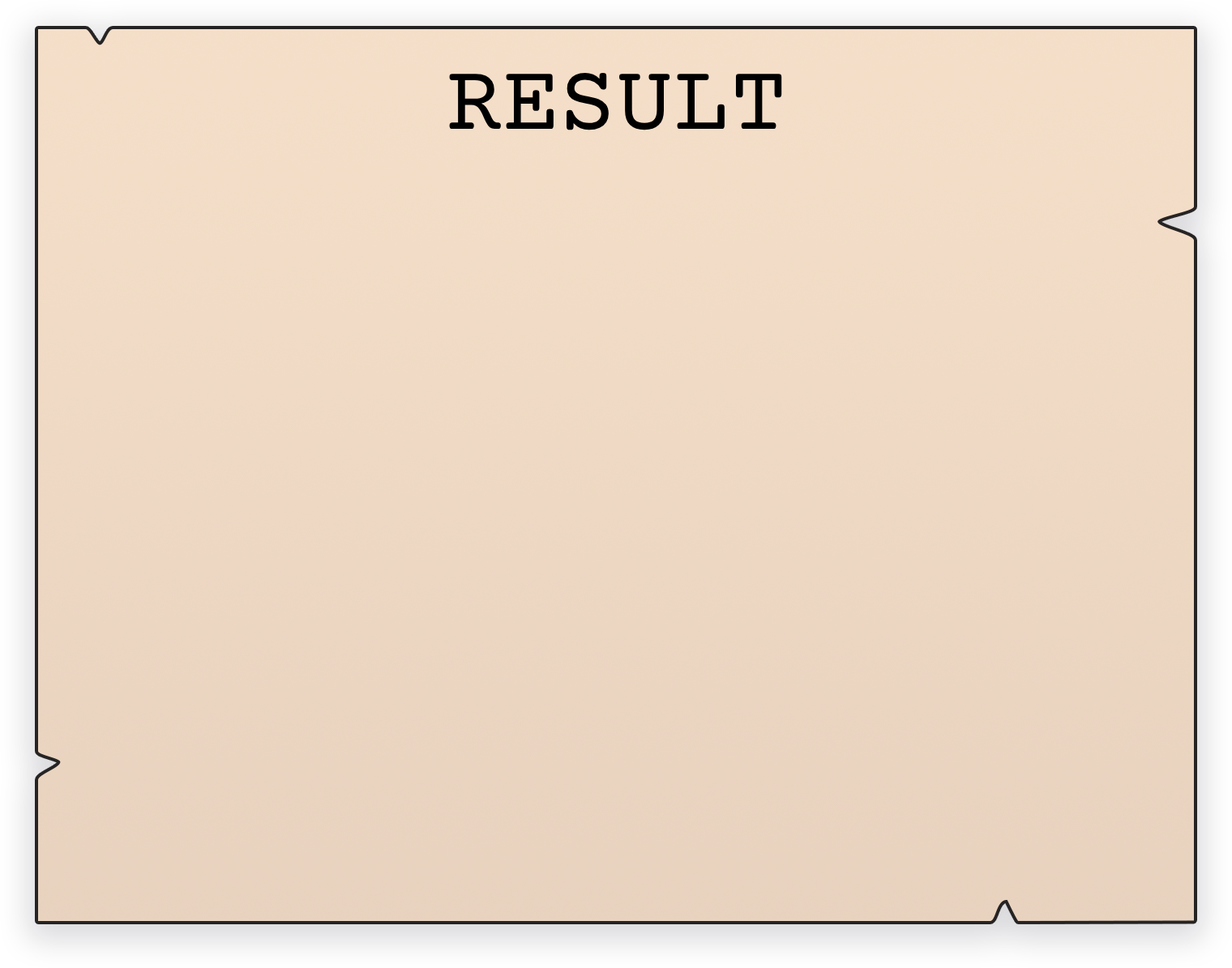
<style>
.page{position:relative;width:1232px;height:968px}
.page>*{position:absolute;margin:0}
.t1{font:94.8px "CourierPrime-Regular";color:#000000}
</style>
<div class="page">
<p class="t1" style="left:449px;top:72px;width:333px;height:58px">RESULT</p>
</div>
